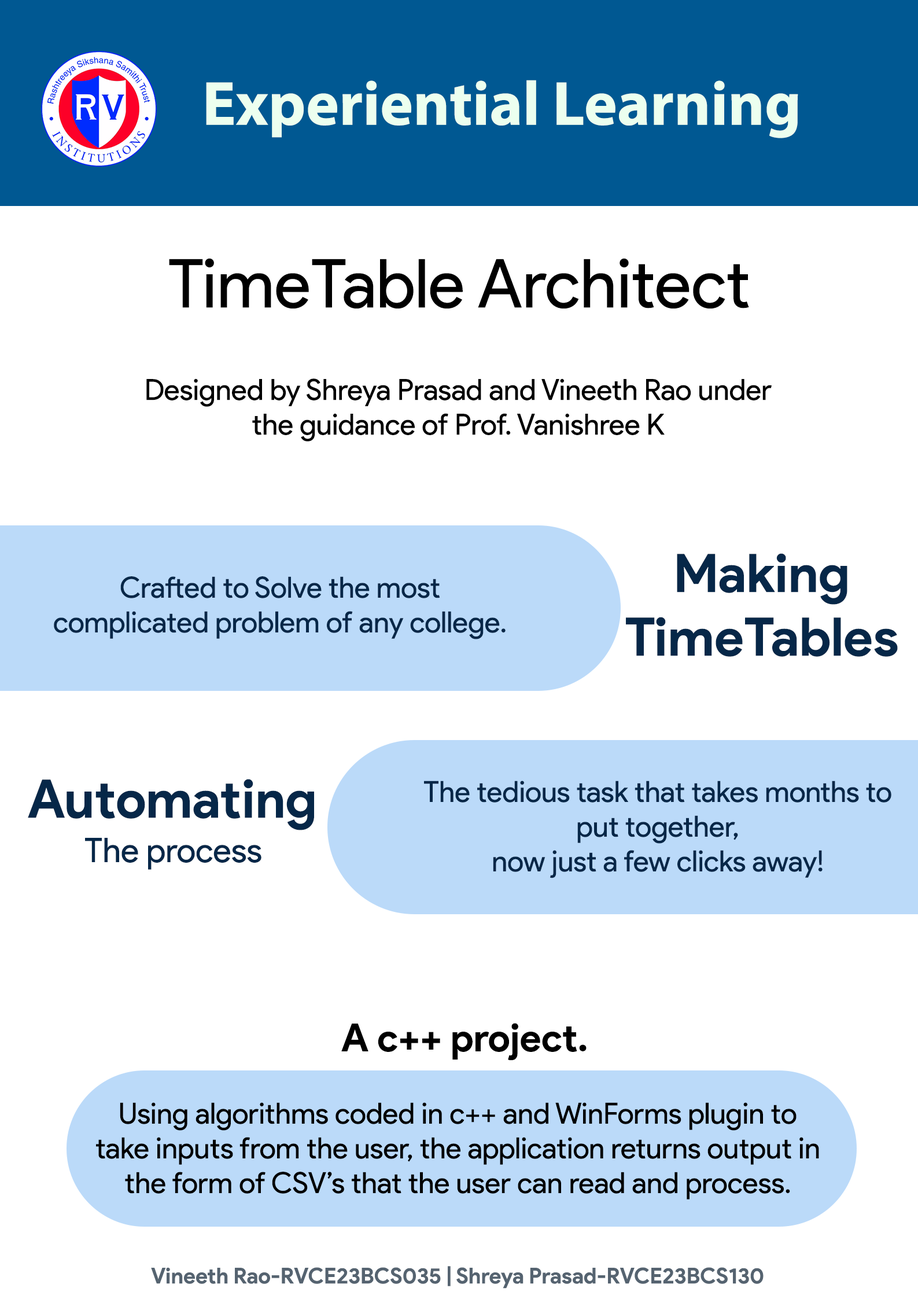
<style>
.page{position:relative;width:918px;height:1299px;background:#ffffff}
.page>*{position:absolute;margin:0}
.t1{font:62.7px "MyriadPro-Bold";color:#ecffef}
.t2{font:67.5px "ProductSans-Regular";color:#000000}
.t3{font:28.9px "ProductSans-Regular";color:#000000}
.t4{font:53px "ProductSans-Bold";color:#062748}
.t5{font:28.9px "ProductSans-Regular";color:#062748}
.t6{font:33.7px "ProductSans-Regular";color:#062748}
.t7{font:38.6px "ProductSans-Bold";color:#000000}
.t8{font:28.9px "ProductSans-Bold";color:#000000}
.t9{font:21.7px "ProductSans-Bold";color:#556370}
</style>
<div class="page">
<p class="t1" style="left:206px;top:80px;width:592px;height:58px">Experiential Learning</p>
<p class="t2" style="left:169px;top:258px;width:580px;height:51px">TimeTable Architect</p>
<p class="t3" style="left:146px;top:378px;width:626px;height:63px;text-align:center">Designed by Shreya Prasad and Vineeth Rao under<br>the guidance of Prof. Vanishree K</p>
<p class="t4" style="left:626px;top:553px;width:272px;height:104px;text-align:center">Making<br>TimeTables</p>
<p class="t5" style="left:54px;top:576px;width:452px;height:63px;text-align:center">Crafted to Solve the most complicated problem of any college.</p>
<p class="t4" style="left:28px;top:779px;width:286px;height:51px">Automating</p>
<p class="t5" style="left:424px;top:780px;width:468px;height:98px;text-align:center">The tedious task that takes months to put together,<br>now just a few clicks away!</p>
<p class="t6" style="left:85px;top:838px;width:176px;height:32px">The process</p>
<p class="t7" style="left:341px;top:1023px;width:246px;height:37px">A c++ project.</p>
<p class="t3" style="left:96px;top:1102px;width:723px;height:97px;text-align:center"><span class="t8"><br></span>Using algorithms coded in c++ and WinForms plugin to take inputs from the user, the application returns output in the form of CSV’s that the user can read and process.</p>
<p class="t9" style="left:151px;top:1266px;width:613px;height:22px">Vineeth Rao-RVCE23BCS035 | Shreya Prasad-RVCE23BCS130</p>
</div>
